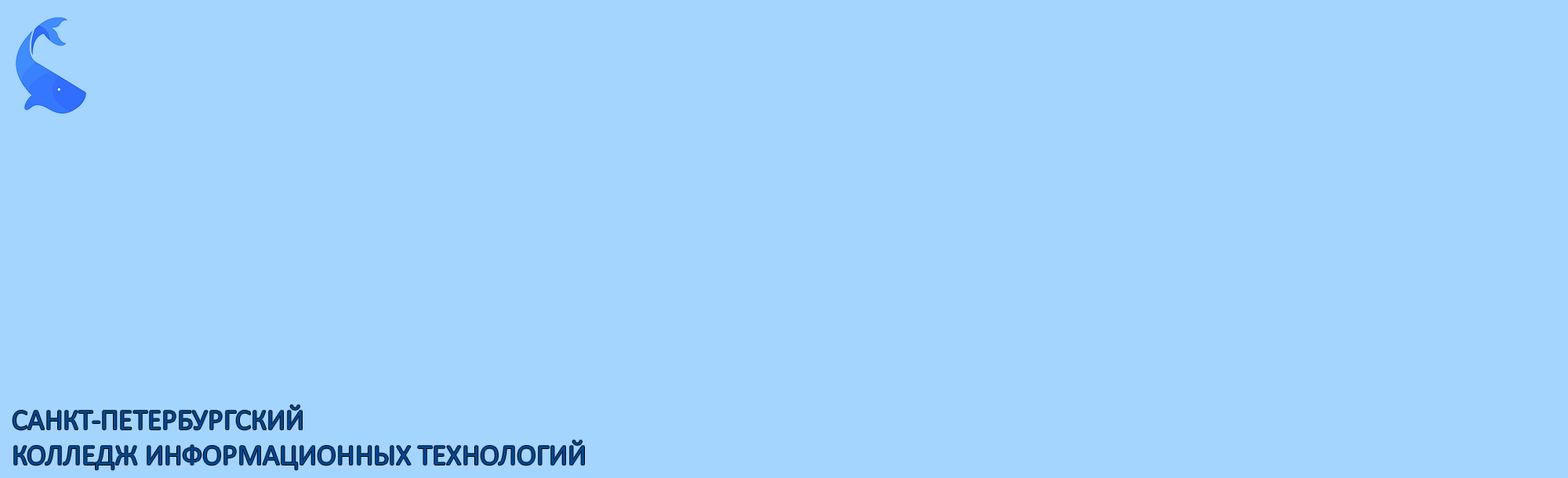
<style>
.page{position:relative;width:1568px;height:478px;background:#a3d5ff}
.page>*{position:absolute;margin:0}
.t1{font:29.4px "Calibri";color:#024794}
</style>
<div class="page">
<p class="t1" style="left:13px;top:405px;width:571px;height:65px">САНКТ-ПЕТЕРБУРГСКИЙ<br>КОЛЛЕДЖ ИНФОРМАЦИОННЫХ ТЕХНОЛОГИЙ</p>
</div>
